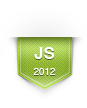
<style>
.page{position:relative;width:87px;height:108px;background:#ffffff}
.page>*{position:absolute;margin:0}
.t1{font:9.7px "Helvetica";color:#fefefe}
.t2{font:17px "Helvetica-Bold";color:#fefefe}
</style>
<div class="page">
<p class="t1" style="left:33px;top:47px;width:23px;height:28px;text-align:center"><span class="t2">JS<br><br></span>2012</p>
</div>
